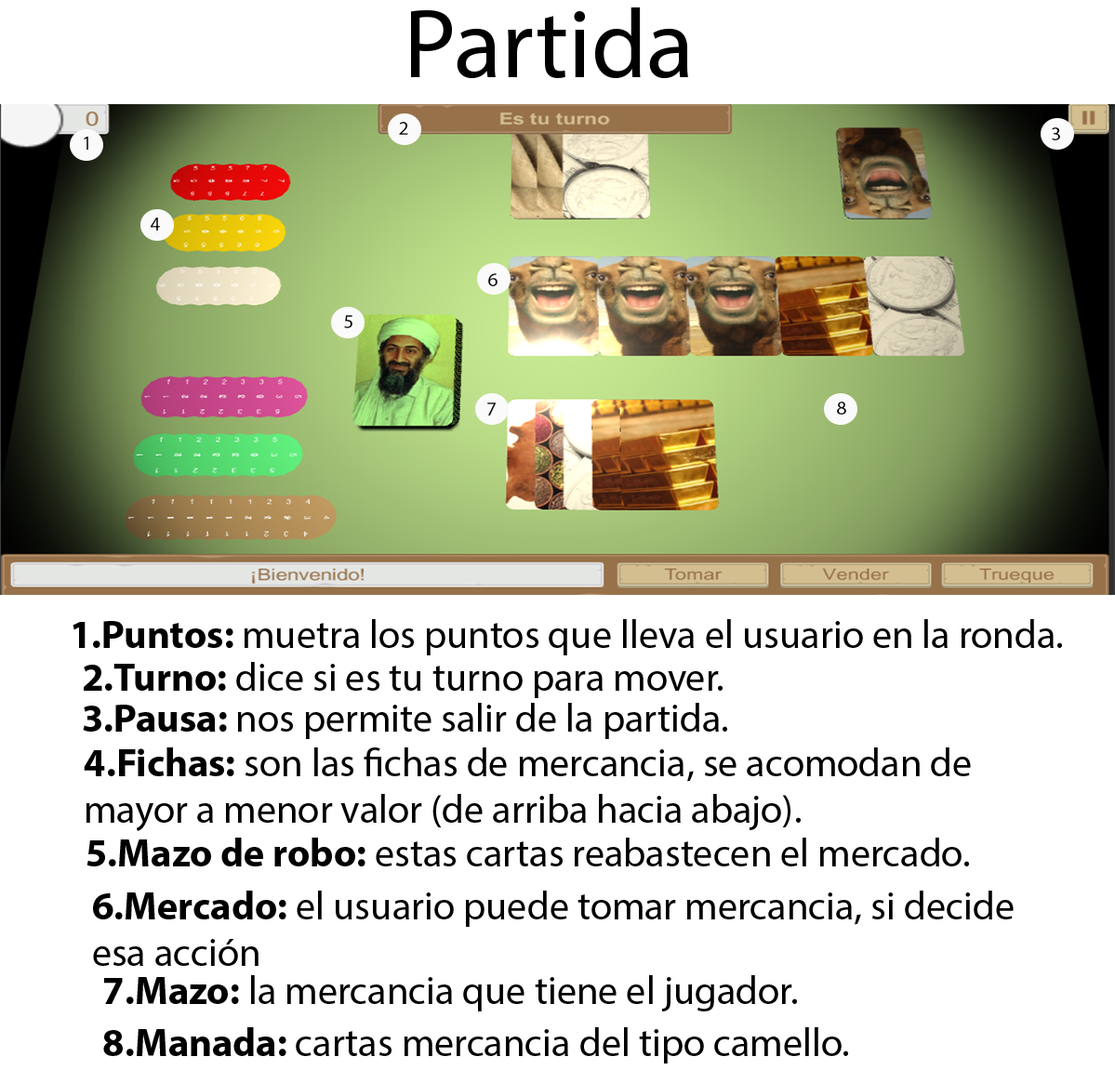
<style>
.page{position:relative;width:1115px;height:1070px;background:#ffffff}
.page>*{position:absolute;margin:0}
.t1{font:98.4px "MyriadPro-Regular";color:#000000}
.t2{font:19.7px "MyriadPro-Regular";color:#000000}
.t3{font:39.3px "MyriadPro-Regular";color:#000000}
.t4{font:39.3px "MyriadPro-Bold";color:#000000}
</style>
<div class="page">
<p class="t1" style="left:411px;top:7px;width:277px;height:72px">Partida</p>
<p class="t2" style="left:399px;top:122px;width:9px;height:13px">2</p>
<p class="t2" style="left:84px;top:137px;width:4px;height:13px">1</p>
<p class="t2" style="left:1051px;top:127px;width:9px;height:13px">3</p>
<p class="t2" style="left:150px;top:218px;width:10px;height:13px">4</p>
<p class="t2" style="left:488px;top:273px;width:9px;height:13px">6</p>
<p class="t2" style="left:344px;top:315px;width:8px;height:13px">5</p>
<p class="t2" style="left:837px;top:402px;width:9px;height:13px">8</p>
<p class="t2" style="left:487px;top:402px;width:8px;height:14px">7</p>
<p class="t3" style="left:73px;top:619px;width:989px;height:36px"><span class="t4">1.Puntos: </span>muetra los puntos que lleva el usuario en la ronda.</p>
<p class="t3" style="left:84px;top:662px;width:638px;height:36px"><span class="t4">2.Turno:</span> dice si es tu turno para mover.</p>
<p class="t3" style="left:83px;top:703px;width:644px;height:36px"><span class="t4">3.Pausa: </span>nos permite salir de la partida.</p>
<p class="t3" style="left:84px;top:747px;width:886px;height:84px;text-align:right"><span class="t4">4.Fichas:</span> son las fichas de mercancia, se acomodan de mayor a menor valor (de arriba hacia abajo).</p>
<p class="t3" style="left:86px;top:838px;width:883px;height:28px"><span class="t4">5.Mazo de robo: </span>estas cartas reabastecen el mercado.</p>
<p class="t3" style="left:93px;top:891px;width:920px;height:75px;text-align:right"><span class="t4">6.Mercado: </span>el usuario puede tomar mercancia, si decide esa acción</p>
<p class="t3" style="left:104px;top:975px;width:693px;height:36px"><span class="t4">7.Mazo:</span> la mercancia que tiene el jugador.</p>
<p class="t3" style="left:103px;top:1027px;width:745px;height:36px"><span class="t4">8.Manada: </span>cartas mercancia del tipo camello.</p>
</div>
